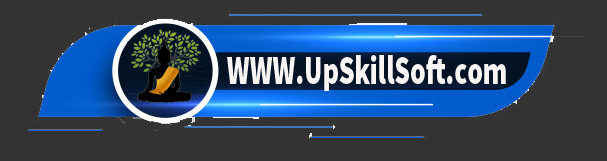
<style>
.page{position:relative;width:607px;height:161px;background:#333333}
.page>*{position:absolute;margin:0}
.t1{font:39.7px "SourceSansPro-Black";color:#f9f5f5;scale:0.7 1}
</style>
<div class="page">
<p class="t1" style="left:227px;top:55px;width:279px;height:36px">WWW.UpSkillSoft.com</p>
</div>
